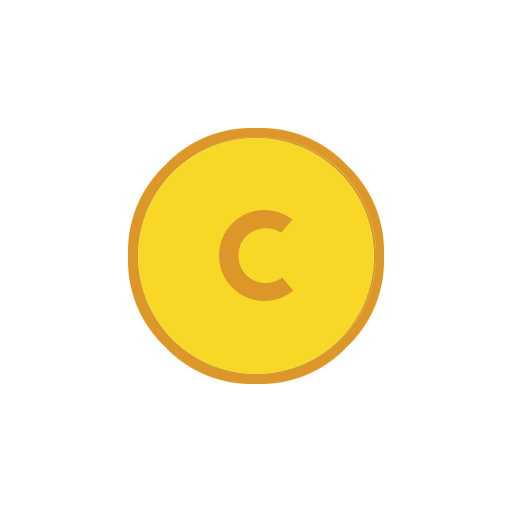
<style>
.page{position:relative;width:512px;height:512px;background:#ffffff}
.page>*{position:absolute;margin:0}
.t1{font:125px "Jaapokki-Regular";color:#dd9728}
</style>
<div class="page">
<p class="t1" style="left:219px;top:210px;width:75px;height:91px">C</p>
</div>
